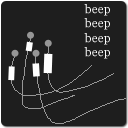
<style>
.page{position:relative;width:128px;height:128px;background:#1e1e1e}
.page>*{position:absolute;margin:0}
.t1{font:12px "Georgia";letter-spacing:0.022em;color:#ffffff}
</style>
<div class="page">
<p class="t1" style="left:84px;top:4px;width:26px;height:55px;text-align:justify">beep<br>beep<br>beep<br>beep</p>
</div>
